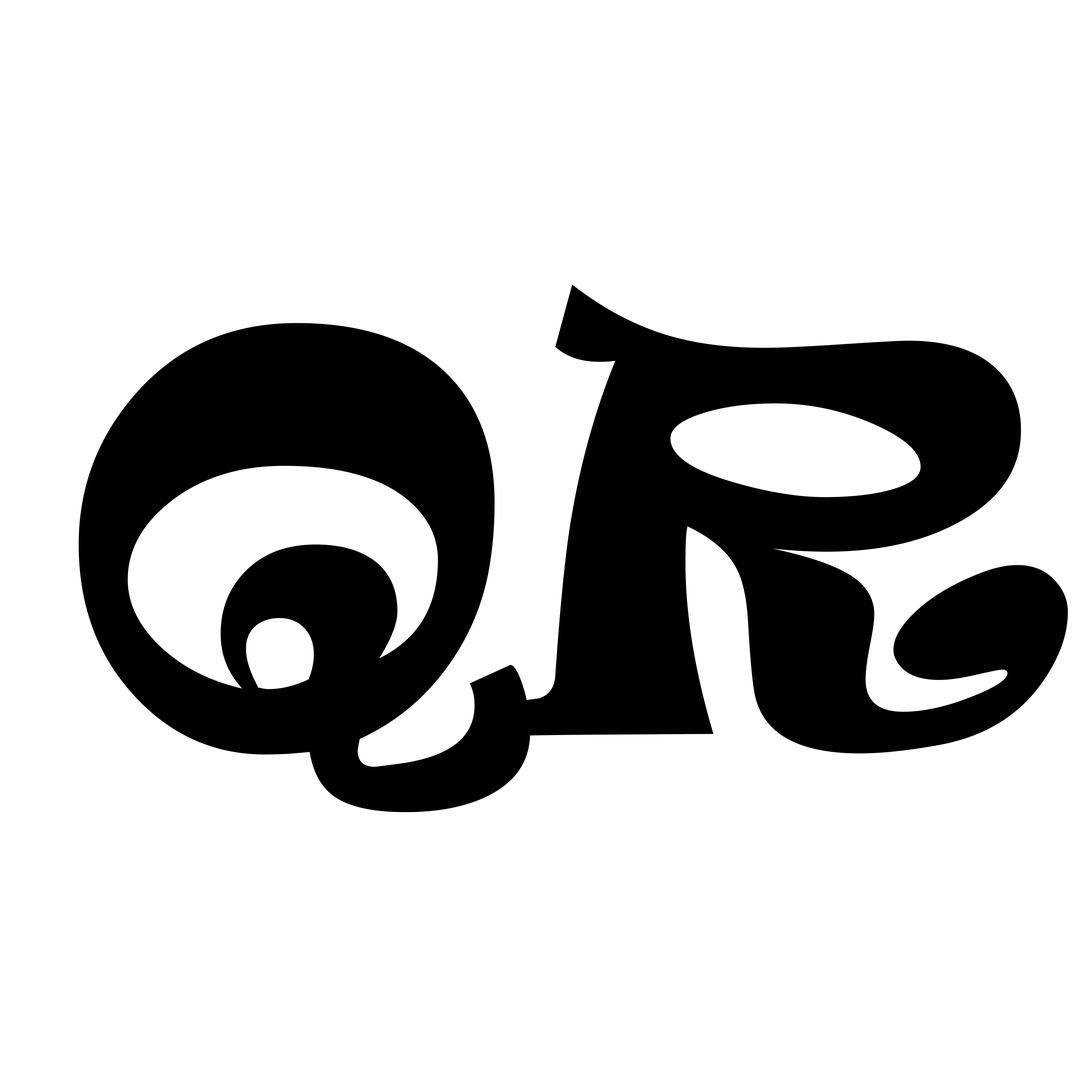
<style>
.page{position:relative;width:1092px;height:1092px;background:#ffffff}
.page>*{position:absolute;margin:0}
.t1{font:539.3px "Ravie";color:#000000}
</style>
<div class="page">
<p class="t1" style="left:79px;top:285px;width:989px;height:527px">QR</p>
</div>
